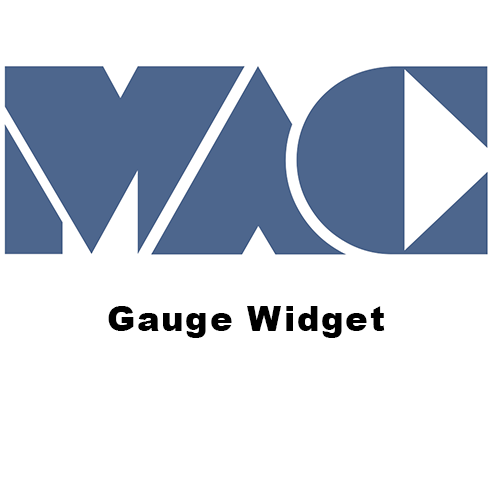
<style>
.page{position:relative;width:492px;height:492px;background:#ffffff}
.page>*{position:absolute;margin:0}
.t1{font:33.9px "Arial-Black";letter-spacing:0.05em;color:#000000}
</style>
<div class="page">
<p class="t1" style="left:108px;top:306px;width:277px;height:32px">Gauge Widget</p>
</div>
